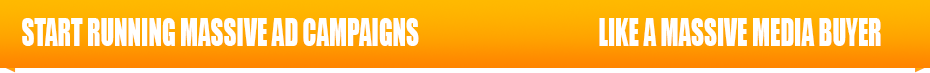
<style>
.page{position:relative;width:930px;height:73px;background:#ffffff}
.page>*{position:absolute;margin:0}
.t1{font:34.5px "Impact";color:#ffffff;scale:0.72 1}
</style>
<div class="page">
<p class="t1" style="left:22px;top:18px;width:397px;height:28px">START RUNNING MASSIVE AD CAMPAIGNS</p>
<p class="t1" style="left:599px;top:18px;width:282px;height:28px">LIKE A MASSIVE MEDIA BUYER</p>
</div>
